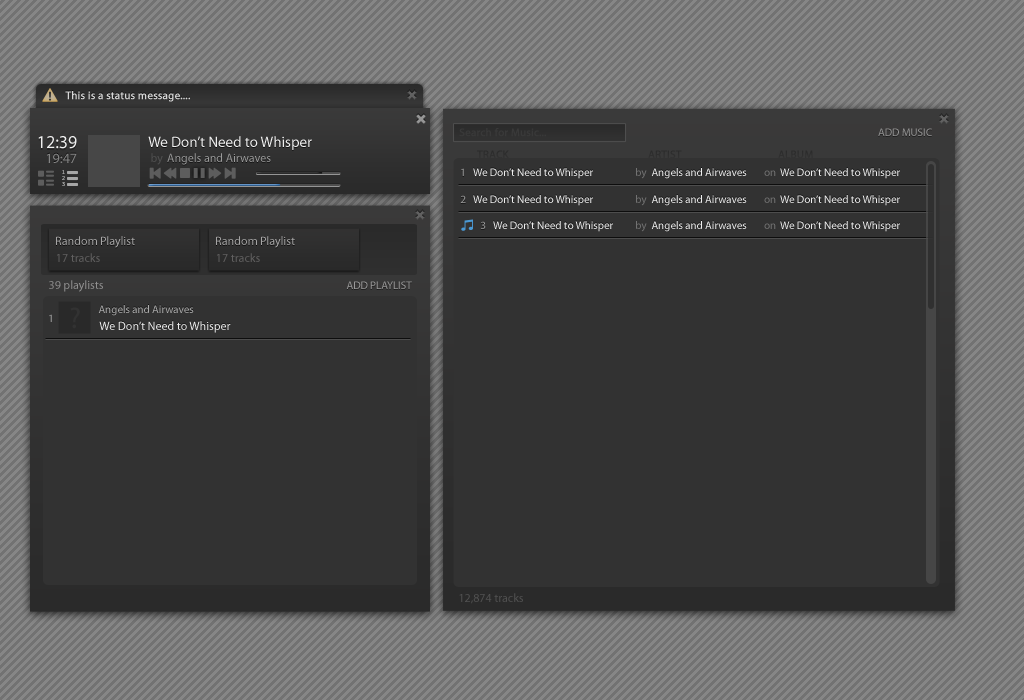
<style>
.page{position:relative;width:1024px;height:700px;background:#323232}
.page>*{position:absolute;margin:0}
.t1{font:11px "MyriadPro-Regular";color:#d8d8d8;font-weight:bold}
.t2{font:18px "MyriadPro-Regular";color:#efefef}
.t3{font:15px "MyriadPro-Regular"}
.t4{font:15px "MyriadPro-Regular";color:#efefef}
.t5{font:11px "MyriadPro-Regular";color:#393939;font-weight:bold}
.t6{font:11px "MyriadPro-Regular";color:#949494;text-transform:uppercase}
.t7{font:11px "MyriadPro-Regular";color:#323232;text-transform:uppercase;font-weight:bold}
.t8{font:14px "MyriadPro-Regular"}
.t9{font:14px "MyriadPro-Regular";color:#838383}
.t10{font:12px "MyriadPro-Regular";color:#505050}
.t11{font:12px "MyriadPro-Regular"}
.t12{font:12px "MyriadPro-Regular";color:#9b9b9b}
.t13{font:11px "MyriadPro-Regular"}
.t14{font:11px "MyriadPro-Regular";color:#efefef}
.t15{font:11px "MyriadPro-Regular";color:#727272}
.t16{font:11px "MyriadPro-Regular";color:#9d9d9d}
.t17{font:12px "MyriadPro-Regular";color:#a7a6a6}
.t18{font:12px "MyriadPro-Regular";color:#616060}
.t19{font:12px "MyriadPro-Regular";color:#909090}
.t20{font:11px "MyriadPro-Regular";color:#999999;text-transform:uppercase}
.t21{font:11px "MyriadPro-Regular";color:#acacac}
.t22{font:30px "MyriadPro-Regular";color:#323232}
.t23{font:12px "MyriadPro-Regular";color:#efefef}
.t24{font:12px "MyriadPro-Regular";color:#515151}
</style>
<div class="page">
<p class="t1" style="left:65px;top:91px;width:125px;height:11px">This is a status message....</p>
<p class="t2" style="left:38px;top:136px;width:39px;height:13px">12:39</p>
<p class="t3" style="left:148px;top:137px;width:164px;height:14px">We Don’t Need to Whisper</p>
<p class="t4" style="left:148px;top:136px;width:164px;height:14px">We Don’t Need to Whisper</p>
<p class="t5" style="left:459px;top:128px;width:87px;height:9px">Search for Music...</p>
<p class="t6" style="left:878px;top:128px;width:54px;height:8px">Add Music</p>
<p class="t7" style="left:477px;top:150px;width:32px;height:9px">Track</p>
<p class="t7" style="left:648px;top:150px;width:34px;height:9px">Artist</p>
<p class="t7" style="left:778px;top:150px;width:35px;height:9px">Album</p>
<p class="t8" style="left:47px;top:152px;width:30px;height:10px">19:47</p>
<p class="t9" style="left:47px;top:153px;width:30px;height:10px">19:47</p>
<p class="t10" style="left:151px;top:153px;width:12px;height:12px">by</p>
<p class="t11" style="left:167px;top:154px;width:104px;height:12px">Angels and Airwaves</p>
<p class="t12" style="left:167px;top:153px;width:104px;height:12px">Angels and Airwaves</p>
<p class="t13" style="left:461px;top:168px;width:3px;height:8px">1</p>
<p class="t14" style="left:473px;top:168px;width:120px;height:11px">We Don’t Need to Whisper</p>
<p class="t15" style="left:636px;top:168px;width:11px;height:11px">by</p>
<p class="t14" style="left:651px;top:168px;width:96px;height:11px">Angels and Airwaves</p>
<p class="t15" style="left:764px;top:170px;width:12px;height:6px">on</p>
<p class="t14" style="left:780px;top:168px;width:120px;height:11px">We Don’t Need to Whisper</p>
<p class="t16" style="left:460px;top:195px;width:6px;height:8px">2</p>
<p class="t14" style="left:473px;top:195px;width:120px;height:11px">We Don’t Need to Whisper</p>
<p class="t15" style="left:636px;top:195px;width:11px;height:11px">by</p>
<p class="t14" style="left:651px;top:195px;width:96px;height:11px">Angels and Airwaves</p>
<p class="t15" style="left:764px;top:197px;width:12px;height:6px">on</p>
<p class="t14" style="left:780px;top:195px;width:120px;height:11px">We Don’t Need to Whisper</p>
<p class="t16" style="left:480px;top:221px;width:6px;height:8px">3</p>
<p class="t14" style="left:493px;top:221px;width:120px;height:11px">We Don’t Need to Whisper</p>
<p class="t15" style="left:636px;top:221px;width:11px;height:11px">by</p>
<p class="t14" style="left:651px;top:221px;width:96px;height:11px">Angels and Airwaves</p>
<p class="t14" style="left:780px;top:221px;width:120px;height:11px">We Don’t Need to Whisper</p>
<p class="t15" style="left:764px;top:223px;width:12px;height:6px">on</p>
<p class="t17" style="left:56px;top:236px;width:79px;height:12px">Random Playlist</p>
<p class="t17" style="left:216px;top:236px;width:79px;height:12px">Random Playlist</p>
<p class="t18" style="left:57px;top:253px;width:43px;height:9px">17 tracks</p>
<p class="t18" style="left:217px;top:253px;width:43px;height:9px">17 tracks</p>
<p class="t19" style="left:49px;top:280px;width:54px;height:12px">39 playlists</p>
<p class="t20" style="left:346px;top:281px;width:66px;height:8px">Add Playlist</p>
<p class="t13" style="left:98px;top:304px;width:96px;height:11px">Angels and Airwaves</p>
<p class="t21" style="left:98px;top:305px;width:96px;height:11px">Angels and Airwaves</p>
<p class="t13" style="left:49px;top:314px;width:3px;height:8px">1</p>
<p class="t22" style="left:70px;top:307px;width:10px;height:22px">?</p>
<p class="t11" style="left:99px;top:320px;width:132px;height:12px">We Don’t Need to Whisper</p>
<p class="t23" style="left:99px;top:321px;width:132px;height:12px">We Don’t Need to Whisper</p>
<p class="t24" style="left:459px;top:593px;width:64px;height:11px">12,874 tracks</p>
</div>
